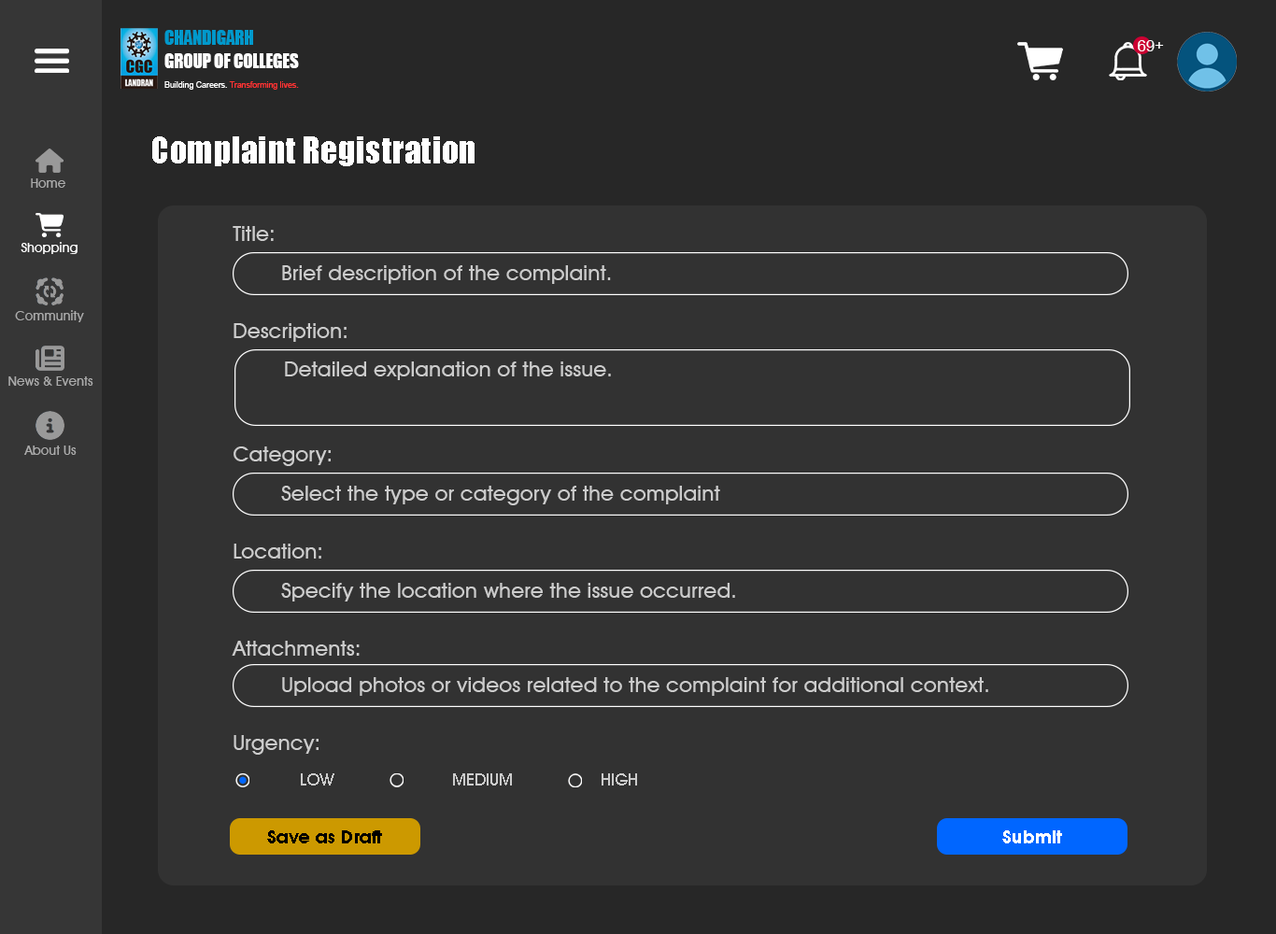
<style>
.page{position:relative;width:1276px;height:934px;background:#323232}
.page>*{position:absolute;margin:0}
.t1{font:18.9px "Impact";color:#ffffff;scale:0.92 1}
.t2{font:18.9px "Impact";color:#0099cc;scale:0.92 1}
.t3{font:15.5px "ArialMT";color:#ffffff}
.t4{font:8.9px "ArialMT";color:#ff3333;scale:0.92 1}
.t5{font:8.9px "ArialMT";color:#ffffff;scale:0.92 1}
.t6{font:34.4px "Impact";color:#ffffff}
.t7{font:13.1px "AvantGardeITCbyBT-Medium";color:#acacac}
.t8{font:21.5px "AvantGardeITCbyBT-Medium";color:#cccccc}
.t9{font:13.1px "AvantGardeITCbyBT-Medium";color:#ffffff}
.t10{font:21.6px "AvantGardeITCbyBT-Medium";color:#cccccc}
.t11{font:16.6px "AvantGardeITCbyBT-Medium";color:#cccccc}
.t12{font:18.2px "AvalonBold";color:#000000}
.t13{font:18.2px "AvalonBold";color:#ffffff}
</style>
<div class="page">
<p class="t1" style="left:164px;top:30px;width:135px;height:38px"><span class="t2">CHANDIGARH<br></span>GROUP OF COLLEGES</p>
<p class="t3" style="left:1138px;top:40px;width:26px;height:11px">69+</p>
<p class="t4" style="left:164px;top:81px;width:135px;height:9px"><span class="t5">Building Careers. </span>Transforming lives.</p>
<p class="t6" style="left:152px;top:136px;width:323px;height:30px">Complaint Registration</p>
<p class="t7" style="left:31px;top:178px;width:34px;height:10px">Home</p>
<p class="t8" style="left:233px;top:226px;width:41px;height:15px">Title:</p>
<p class="t9" style="left:21px;top:242px;width:57px;height:12px">Shopping</p>
<p class="t10" style="left:282px;top:265px;width:329px;height:19px">Brief description of the complaint.</p>
<p class="t7" style="left:15px;top:310px;width:69px;height:12px">Community</p>
<p class="t8" style="left:234px;top:323px;width:113px;height:19px">Description:</p>
<p class="t10" style="left:285px;top:362px;width:326px;height:18px">Detailed explanation of the issue.</p>
<p class="t7" style="left:8px;top:377px;width:85px;height:9px">News &amp; Events</p>
<p class="t7" style="left:24px;top:446px;width:53px;height:9px">About Us</p>
<p class="t8" style="left:234px;top:447px;width:97px;height:19px">Category:</p>
<p class="t10" style="left:281px;top:486px;width:439px;height:19px">Select the type or category of the complaint</p>
<p class="t8" style="left:234px;top:544px;width:87px;height:15px">Location:</p>
<p class="t10" style="left:281px;top:583px;width:454px;height:19px">Specify the location where the issue occurred.</p>
<p class="t8" style="left:232px;top:641px;width:128px;height:15px">Attachments:</p>
<p class="t10" style="left:282px;top:677px;width:707px;height:19px">Upload photos or videos related to the complaint for additional context.</p>
<p class="t8" style="left:234px;top:735px;width:85px;height:20px">Urgency:</p>
<p class="t11" style="left:301px;top:774px;width:33px;height:12px">LOW</p>
<p class="t11" style="left:453px;top:774px;width:59px;height:12px">MEDIUM</p>
<p class="t11" style="left:602px;top:774px;width:35px;height:12px">HIGH</p>
<p class="t12" style="left:267px;top:831px;width:115px;height:13px">Save as Draft</p>
<p class="t13" style="left:1003px;top:831px;width:59px;height:13px">Submit</p>
</div>
